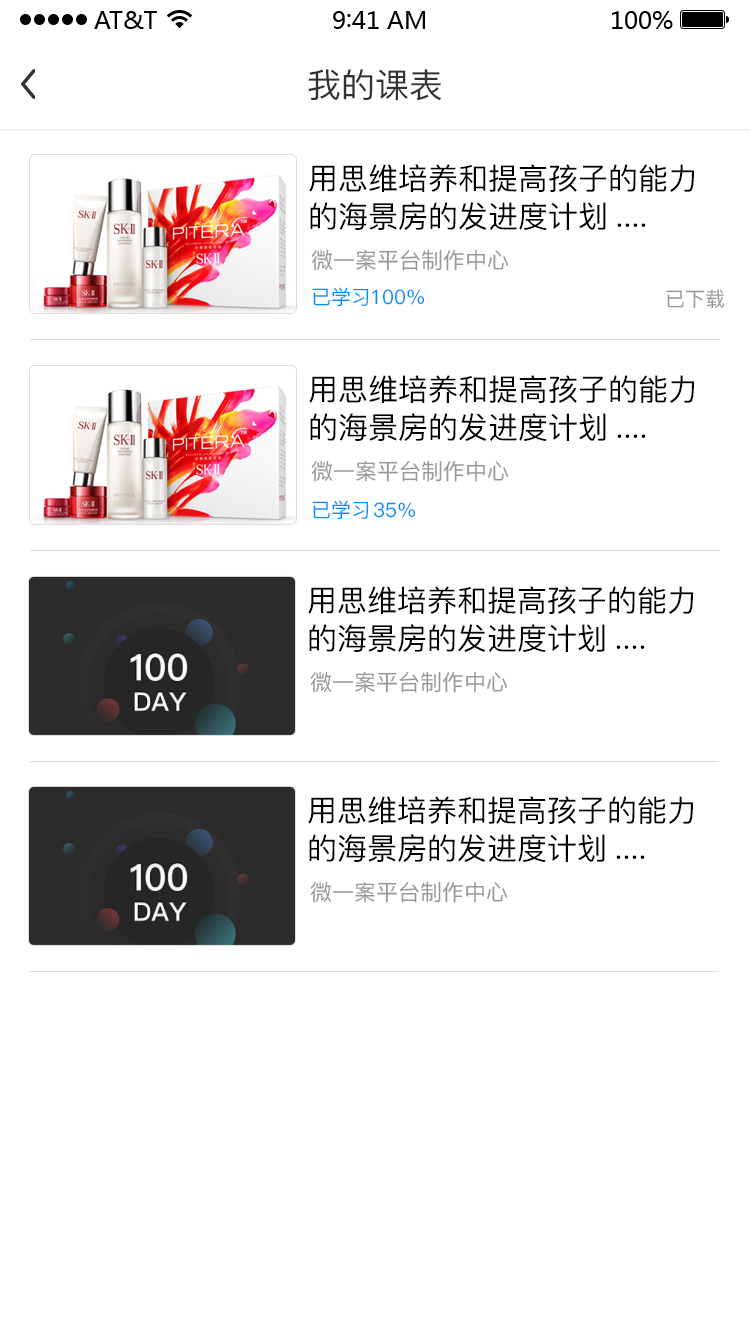
<style>
.page{position:relative;width:750px;height:1334px;background:#ffffff}
.page>*{position:absolute;margin:0}
.t1{font:34px "PingFang-SC-Medium";color:#333333}
.t2{font:30px/38px "PingFang-SC-Medium";color:#000000}
.t3{font:22px "PingFang-SC-Medium";color:#999999}
.t4{font:20px "PingFang-SC-Medium";color:#0090ff}
.t5{font:20px "PingFang-SC-Medium";color:#999999}
</style>
<div class="page">
<p class="t1" style="left:308px;top:69px;width:133px;height:32px">我的课表</p>
<p class="t2" style="left:309px;top:164px;width:386px;height:66px">用思维培养和提高孩子的能力<br>的海景房的发进度计划....</p>
<p class="t3" style="left:311px;top:249px;width:198px;height:22px">微一案平台制作中心</p>
<p class="t4" style="left:312px;top:287px;width:57px;height:20px">已学习</p>
<p class="t4" style="left:372px;top:289px;width:53px;height:16px">100%</p>
<p class="t5" style="left:666px;top:289px;width:59px;height:20px">已下载</p>
<p class="t2" style="left:309px;top:375px;width:386px;height:66px">用思维培养和提高孩子的能力<br>的海景房的发进度计划....</p>
<p class="t3" style="left:311px;top:460px;width:198px;height:22px">微一案平台制作中心</p>
<p class="t4" style="left:312px;top:500px;width:57px;height:20px">已学习</p>
<p class="t4" style="left:374px;top:502px;width:42px;height:16px">35%</p>
<p class="t2" style="left:308px;top:586px;width:386px;height:66px">用思维培养和提高孩子的能力<br>的海景房的发进度计划....</p>
<p class="t3" style="left:310px;top:671px;width:198px;height:22px">微一案平台制作中心</p>
<p class="t2" style="left:308px;top:796px;width:386px;height:66px">用思维培养和提高孩子的能力<br>的海景房的发进度计划....</p>
<p class="t3" style="left:310px;top:881px;width:198px;height:22px">微一案平台制作中心</p>
</div>
